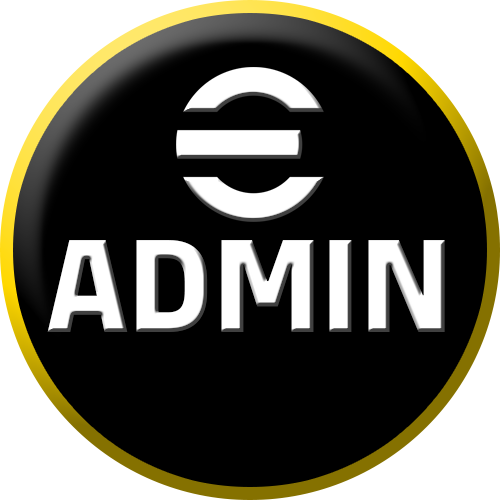
<style>
.page{position:relative;width:500px;height:500px;background:#000000}
.page>*{position:absolute;margin:0}
.t1{font:134.7px "eFootballSans-Bold";color:#ffffff}
</style>
<div class="page">
<p class="t1" style="left:47px;top:240px;width:398px;height:92px">ADMIN</p>
</div>
